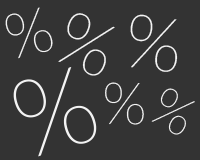
<style>
.page{position:relative;width:200px;height:160px;background:#333333}
.page>*{position:absolute;margin:0}
.t1{font:62.5px "Lato-Thin";letter-spacing:-0.08em;color:#f3f3f3}
.t2{font:75px "Lato-Thin";letter-spacing:-0.08em;color:#f3f3f3}
.t3{font:108.3px "Lato-Thin";letter-spacing:-0.08em;color:#f3f3f3}
.t4{font:58.3px "Lato-Thin";letter-spacing:-0.08em;color:#f3f3f3}
.t5{font:54.2px "Lato-Thin";letter-spacing:-0.08em;color:#f3f3f3}
</style>
<div class="page">
<p class="t1" style="left:5px;top:7px;width:48px;height:52px;rotate:-14deg">%</p>
<p class="t2" style="left:58px;top:13px;width:57px;height:63px;rotate:22deg">%</p>
<p class="t2" style="left:130px;top:14px;width:48px;height:58px;rotate:7deg">%</p>
<p class="t3" style="left:13px;top:66px;width:84px;height:91px;rotate:-17deg">%</p>
<p class="t4" style="left:105px;top:82px;width:39px;height:43px">%</p>
<p class="t5" style="left:151px;top:88px;width:44px;height:47px;rotate:29deg">%</p>
</div>
